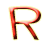
<style>
.page{position:relative;width:50px;height:50px;background:#ffffff}
.page>*{position:absolute;margin:0}
.t1{font:45px "AvenirLTStd-Light"}
</style>
<div class="page">
<p class="t1" style="left:9px;top:6px;width:32px;height:34px">R</p>
</div>
